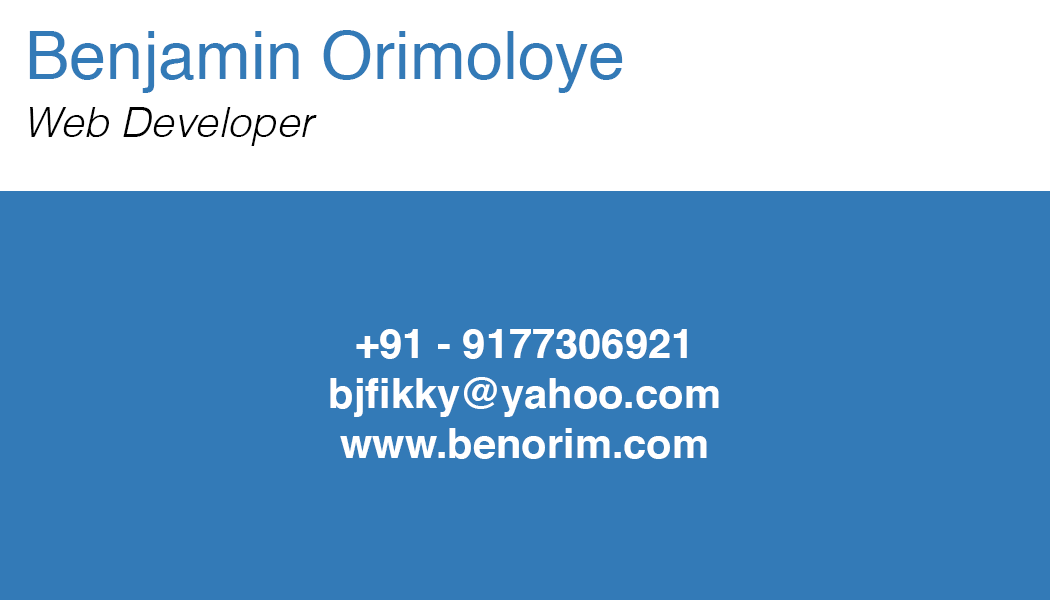
<style>
.page{position:relative;width:1050px;height:600px;background:#337ab7}
.page>*{position:absolute;margin:0}
.t1{font:66.7px "Helvetica";color:#337ab7}
.t2{font:41.7px "Helvetica-LightOblique";color:#000000}
.t3{font:41.7px "Helvetica-Bold";color:#ffffff}
</style>
<div class="page">
<p class="t1" style="left:29px;top:30px;width:594px;height:63px">Benjamin Orimoloye</p>
<p class="t2" style="left:30px;top:107px;width:287px;height:39px">Web Developer</p>
<p class="t3" style="left:330px;top:329px;width:389px;height:130px;text-align:center">+91 - 9177306921<br>bjfikky@yahoo.com<br>www.benorim.com</p>
</div>
